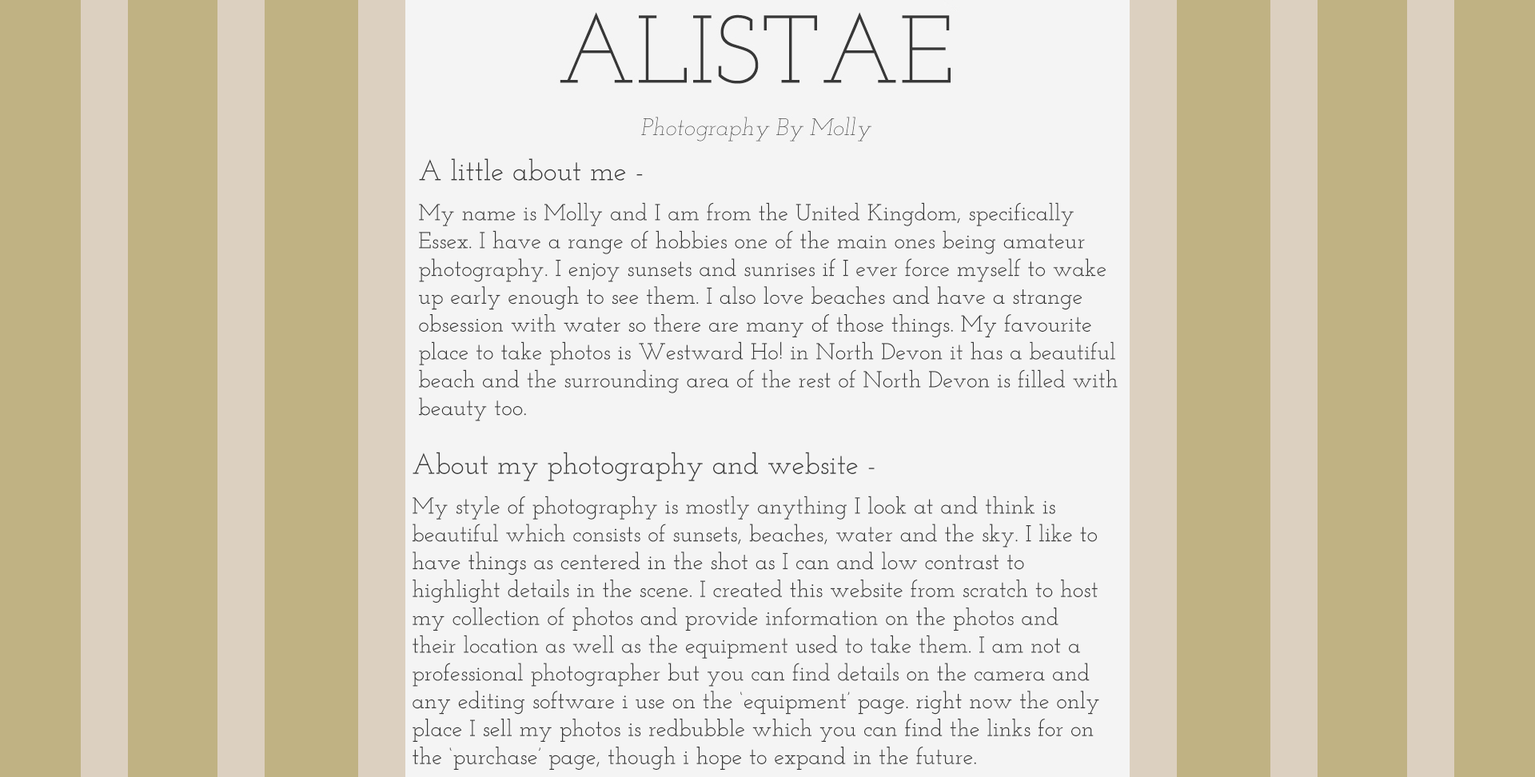
<style>
.page{position:relative;width:1535px;height:777px;background:#c0b283}
.page>*{position:absolute;margin:0}
.t1{font:28.8px "JosefinSlab-Regular";color:#383838}
.t2{font:23.2px "JosefinSlab-Regular";color:#383838}
</style>
<div class="page">
<p class="t1" style="left:419px;top:158px;width:224px;height:23px">A little about me -</p>
<p class="t2" style="left:419px;top:202px;width:698px;height:219px">My name is Molly and I am from the United Kingdom, specifically Essex. I have a range of hobbies one of the main ones being amateur photography. I enjoy sunsets and sunrises if I ever force myself to wake up early enough to see them. I also love beaches and have a strange obsession with water so there are many of those things. My favourite place to take photos is Westward Ho! in North Devon it has a beautiful beach and the surrounding area of the rest of North Devon is filled with beauty too.</p>
<p class="t1" style="left:412px;top:452px;width:462px;height:29px">About my photography and website -</p>
<p class="t2" style="left:412px;top:496px;width:687px;height:274px">My style of photography is mostly anything I look at and think is beautiful which consists of sunsets, beaches, water and the sky. I like to have things as centered in the shot as I can and low contrast to highlight details in the scene. I created this website from scratch to host my collection of photos and provide information on the photos and their location as well as the equipment used to take them. I am not a professional photographer but you can find details on the camera and any editing software i use on the ‘equipment’ page. right now the only place I sell my photos is redbubble which you can find the links for on the ‘purchase’ page, though i hope to expand in the future.</p>
</div>
